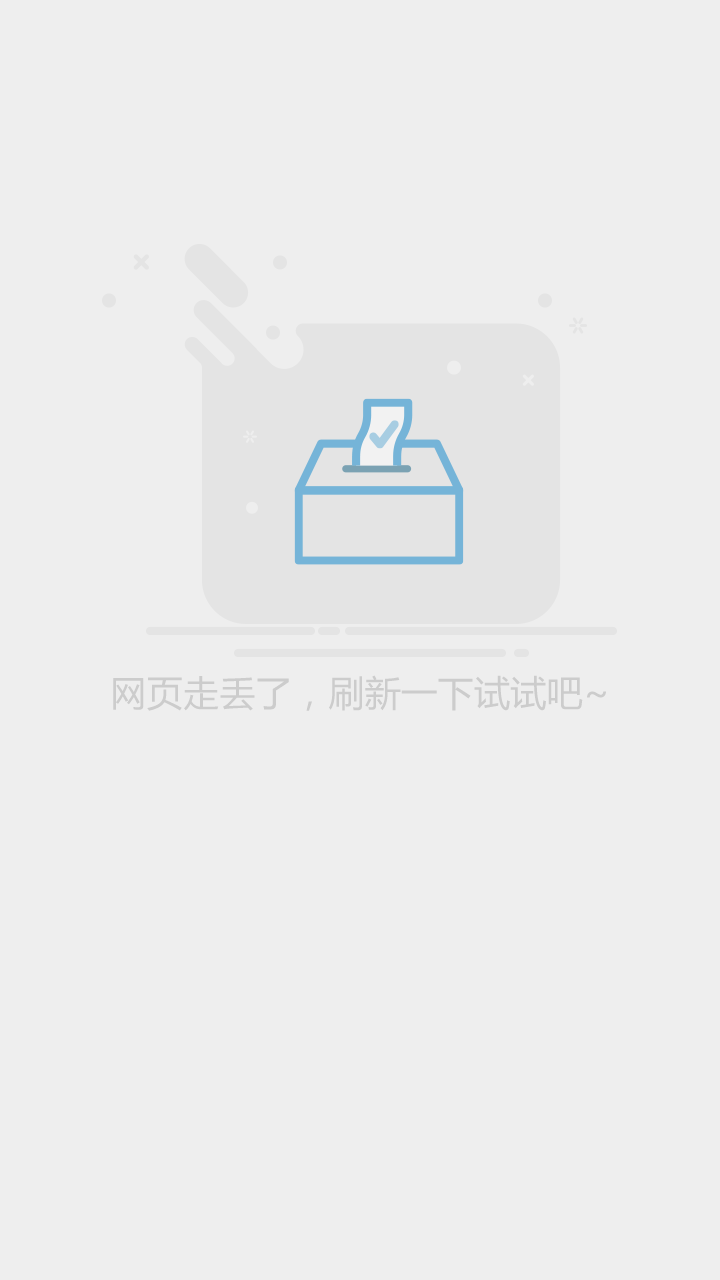
<style>
.page{position:relative;width:720px;height:1280px;background:#eeeeee}
.page>*{position:absolute;margin:0}
.t1{font:36px "MicrosoftYaHeiUI";letter-spacing:0.01em;color:#cccccc}
</style>
<div class="page">
<p class="t1" style="left:113px;top:675px;width:493px;height:36px">网页走丢了，刷新一下试试吧~</p>
</div>
